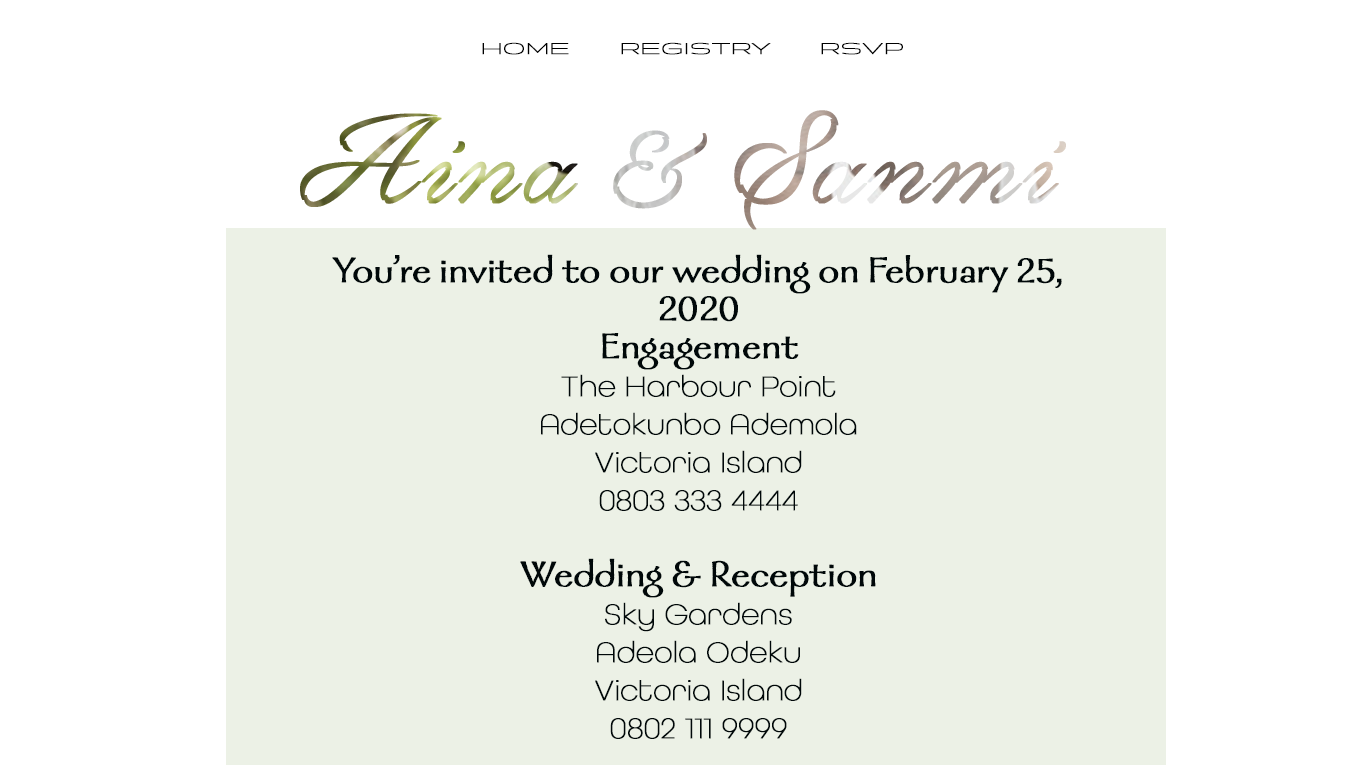
<style>
.page{position:relative;width:1366px;height:768px;background:#ffffff}
.page>*{position:absolute;margin:0}
.t1{font:16px "Briller-Light";color:#000000;font-weight:bold}
.t2{font:30px/38px "AllRoundGothic-XLig";color:#000809;font-weight:bold}
.t3{font:40px/38px "GalahadStd-Regular";color:#000809;font-weight:bold}
</style>
<div class="page">
<p class="t1" style="left:482px;top:42px;width:87px;height:13px">HOME</p>
<p class="t1" style="left:621px;top:42px;width:150px;height:13px">REGISTRY</p>
<p class="t1" style="left:821px;top:42px;width:82px;height:13px">RSVP</p>
<p class="t2" style="left:332px;top:254px;width:730px;height:485px;text-align:center"><span class="t3">You’re invited to our wedding on February 25,<br>2020<br>Engagement<br></span>The Harbour Point<br>Adetokunbo Ademola<br>Victoria Island<br>0803 333 4444<br><br><span class="t3">Wedding &amp; Reception<br></span>Sky Gardens<br>Adeola Odeku<br>Victoria Island<br>0802 111 9999</p>
</div>
